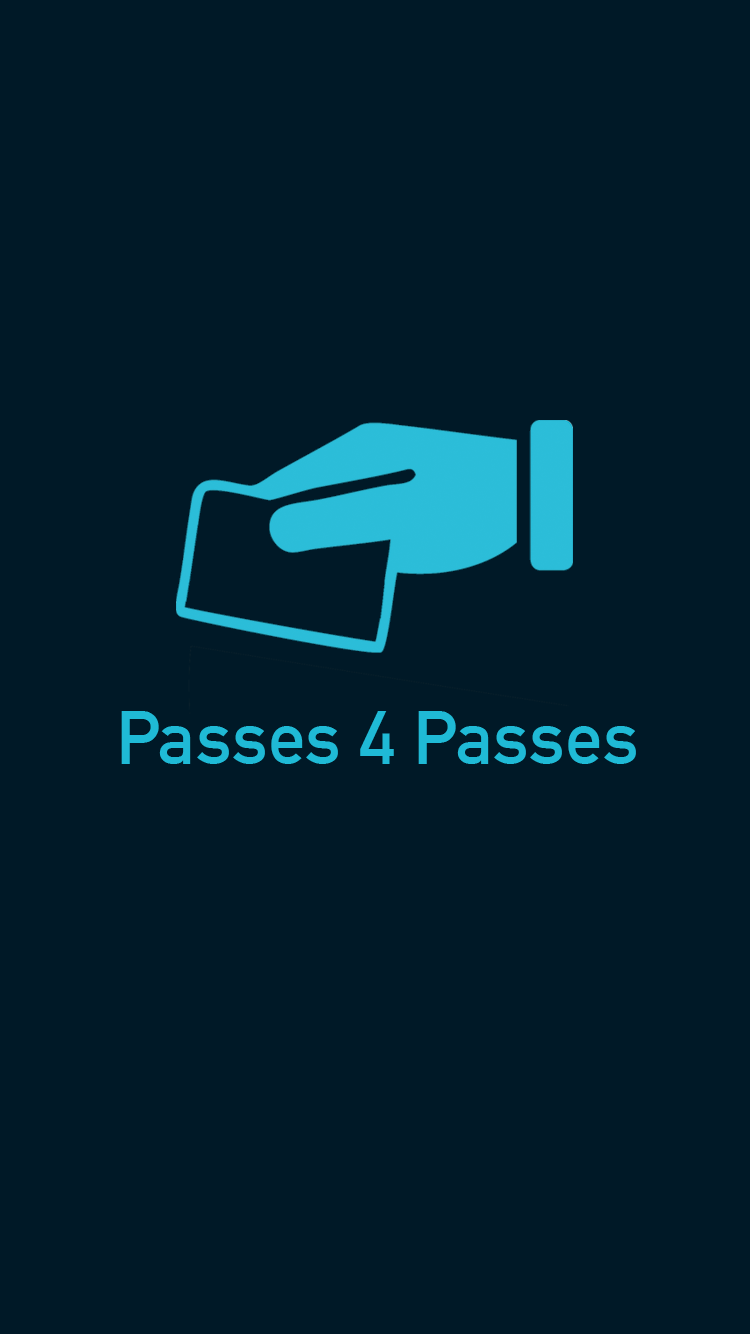
<style>
.page{position:relative;width:750px;height:1334px;background:#001927}
.page>*{position:absolute;margin:0}
.t1{font:75px "DINAlternate-Bold";color:#1fbad6}
</style>
<div class="page">
<p class="t1" style="left:121px;top:711px;width:515px;height:53px">Passes 4 Passes</p>
</div>
